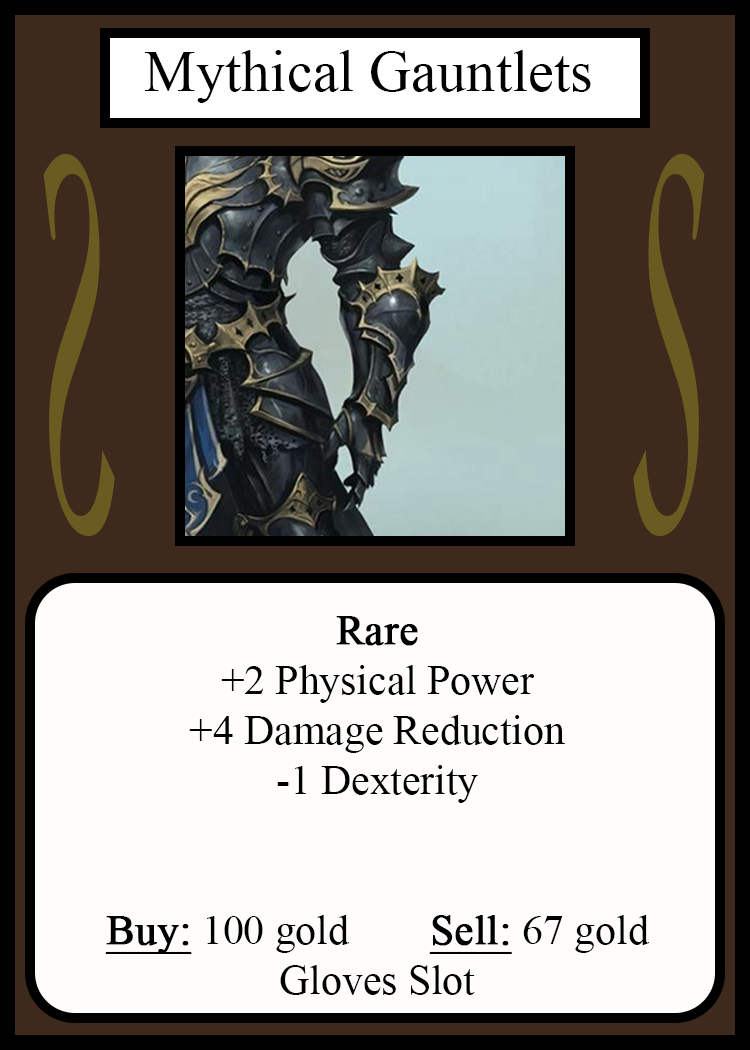
<style>
.page{position:relative;width:750px;height:1050px;background:#fffcfc}
.page>*{position:absolute;margin:0}
.t1{font:58.3px "TimesNewRomanPSMT";color:#010101}
.t2{font:548.5px "Apple-Chancery";color:#6a5c21;scale:0.27 1}
.t3{font:548.2px "Apple-Chancery";color:#6a5c21;scale:0.27 1}
.t4{font:41.7px "TimesNewRomanPSMT";color:#000000}
.t5{font:41.7px "TimesNewRomanPSMT";color:#000000;font-weight:bold}
.t6{font:41.7px "TimesNewRomanPSMT";color:#000000;font-weight:bold;text-decoration:underline}
</style>
<div class="page">
<p class="t1" style="left:144px;top:50px;width:447px;height:53px">Mythical Gauntlets</p>
<p class="t2" style="left:43px;top:154px;width:72px;height:382px;rotate:180deg">S</p>
<p class="t3" style="left:633px;top:154px;width:72px;height:382px">S</p>
<p class="t4" style="left:105px;top:616px;width:545px;height:379px;text-align:center"><span class="t5">Rare</span><br>+2 Physical Power<br>+4 Damage Reduction<br>-1 Dexterity<br><br><br><span class="t6">Buy:</span> 100 gold   <span class="t6">Sell:</span> 67 gold<br>Gloves Slot</p>
</div>
